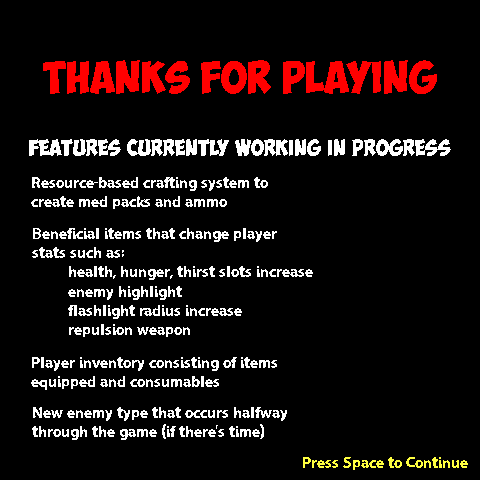
<style>
.page{position:relative;width:480px;height:480px;background:#000000}
.page>*{position:absolute;margin:0}
.t1{font:32px "ObelixPro";color:#ff0000}
.t2{font:16px "ObelixPro";color:#ffffff}
.t3{font:16px "LooseySans";color:#ffffff}
.t4{font:16px "LooseySans";color:#ffff40}
</style>
<div class="page">
<p class="t1" style="left:43px;top:60px;width:394px;height:34px">thanks for playing</p>
<p class="t2" style="left:29px;top:139px;width:422px;height:17px">features currently working in progress</p>
<p class="t3" style="left:31px;top:177px;width:237px;height:32px">Resource-based crafting system to <br>create med packs and ammo</p>
<p class="t3" style="left:32px;top:228px;width:281px;height:109px">Beneficial items that change player<br>stats such as:<br> health, hunger, thirst slots increase<br> enemy highlight<br> flashlight radius increase<br> repulsion weapon</p>
<p class="t3" style="left:31px;top:357px;width:246px;height:33px">Player inventory consisting of items<br>equipped and consumables</p>
<p class="t3" style="left:32px;top:407px;width:255px;height:33px">New enemy type that occurs halfway<br>through the game (if there's time)</p>
<p class="t4" style="left:303px;top:457px;width:165px;height:13px">Press Space to Continue</p>
</div>
